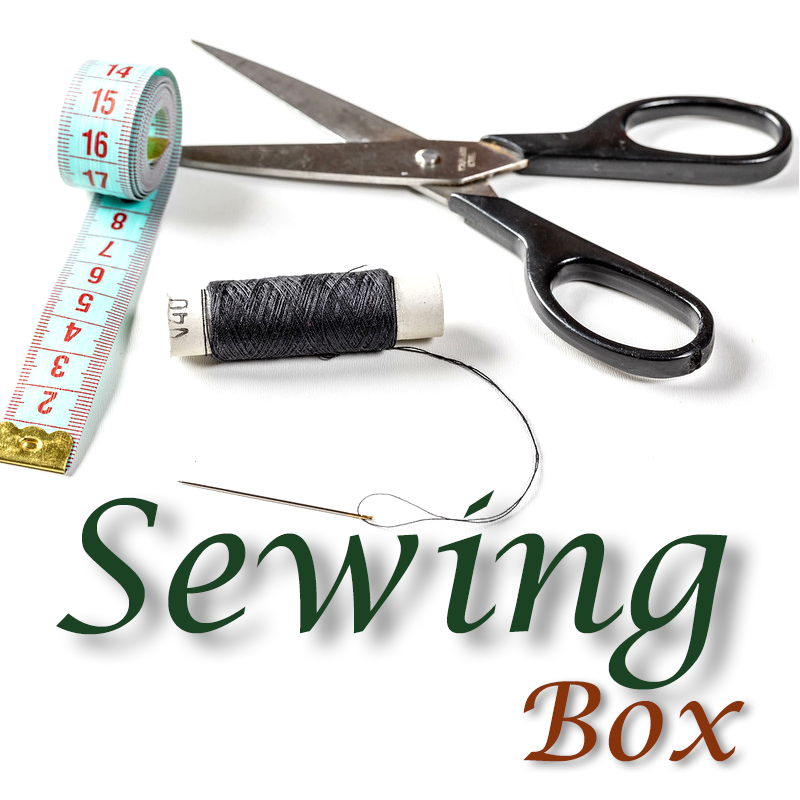
<style>
.page{position:relative;width:800px;height:800px;background:#ffffff}
.page>*{position:absolute;margin:0}
.t1{font:180px "LucidaCalligraphy-Italic";color:#1b4323}
.t2{font:109px "LucidaCalligraphy-Italic";color:#87340c}
</style>
<div class="page">
<p class="t1" style="left:56px;top:490px;width:672px;height:200px">Sewing</p>
<p class="t2" style="left:523px;top:681px;width:222px;height:81px">Box</p>
</div>
